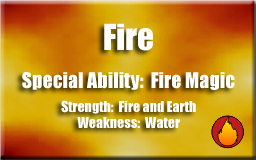
<style>
.page{position:relative;width:256px;height:160px}
.page>*{position:absolute;margin:0}
.t1{font:33.3px "Impact";color:#ffffff}
.t2{font:20px "Impact";color:#ffffff}
.t3{font:14px "Impact";color:#ffffff}
</style>
<div class="page">
<p class="t1" style="left:104px;top:23px;width:49px;height:28px">Fire</p>
<p class="t2" style="left:22px;top:72px;width:213px;height:18px">Special Ability:  Fire Magic</p>
<p class="t3" style="left:61px;top:100px;width:135px;height:14px">Strength:  Fire and Earth</p>
<p class="t3" style="left:77px;top:117px;width:103px;height:11px">Weakness:  Water</p>
</div>
